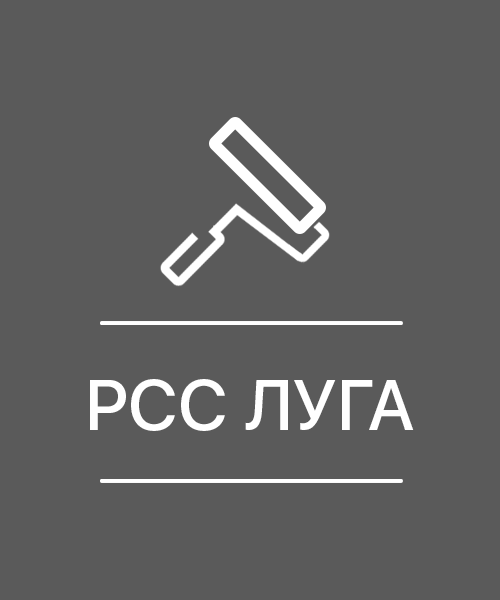
<style>
.page{position:relative;width:500px;height:600px;background:#5a5a5a}
.page>*{position:absolute;margin:0}
.t1{font:70.4px "SFUIDisplay-Medium";color:#ffffff}
</style>
<div class="page">
<p class="t1" style="left:90px;top:379px;width:324px;height:52px">РСС ЛУГА</p>
</div>
